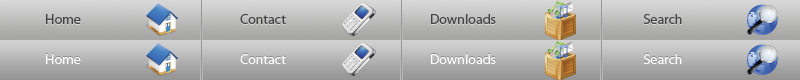
<style>
.page{position:relative;width:800px;height:80px}
.page>*{position:absolute;margin:0}
.t1{font:14px "MyriadPro-Regular";color:#444444}
.t2{font:14px "MyriadPro-Regular";color:#ffffff}
</style>
<div class="page">
<p class="t1" style="left:46px;top:14px;width:35px;height:10px">Home</p>
<p class="t1" style="left:240px;top:14px;width:46px;height:10px">Contact</p>
<p class="t1" style="left:431px;top:14px;width:65px;height:10px">Downloads</p>
<p class="t1" style="left:643px;top:14px;width:39px;height:10px">Search</p>
<p class="t2" style="left:46px;top:54px;width:35px;height:10px">Home</p>
<p class="t2" style="left:240px;top:54px;width:46px;height:10px">Contact</p>
<p class="t2" style="left:431px;top:54px;width:65px;height:10px">Downloads</p>
<p class="t2" style="left:643px;top:54px;width:39px;height:10px">Search</p>
</div>
